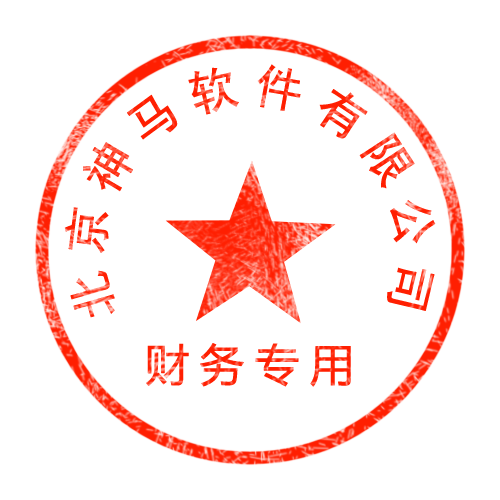
<style>
.page{position:relative;width:500px;height:500px;background:#ffffff}
.page>*{position:absolute;margin:0}
.t1{font:48px "SimHei";letter-spacing:0.22em;font-weight:bold}
.t2{font:44px "MicrosoftYaHei";letter-spacing:0.22em;font-weight:bold}
</style>
<div class="page">
<p class="t1" style="left:64px;top:64px;width:372px;height:254px;rotate:55deg">北京神马软件有限公司</p>
<p class="t2" style="left:146px;top:343px;width:205px;height:44px">财务专用</p>
</div>
